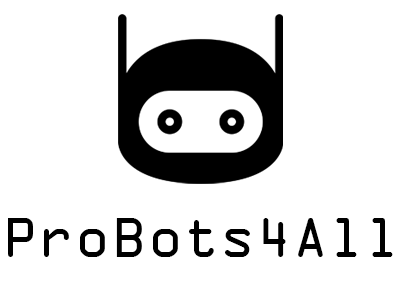
<style>
.page{position:relative;width:400px;height:300px;background:#ffffff}
.page>*{position:absolute;margin:0}
.t1{font:60px "OCRAExtended";color:#000000}
</style>
<div class="page">
<p class="t1" style="left:8px;top:218px;width:385px;height:39px">ProBots4All</p>
</div>
